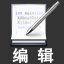
<style>
.page{position:relative;width:64px;height:64px;background:#333333}
.page>*{position:absolute;margin:0}
.t1{font:16.3px "SimHei";color:#ffffff;font-weight:bold}
</style>
<div class="page">
<p class="t1" style="left:12px;top:47px;width:42px;height:16px">编 辑</p>
</div>
